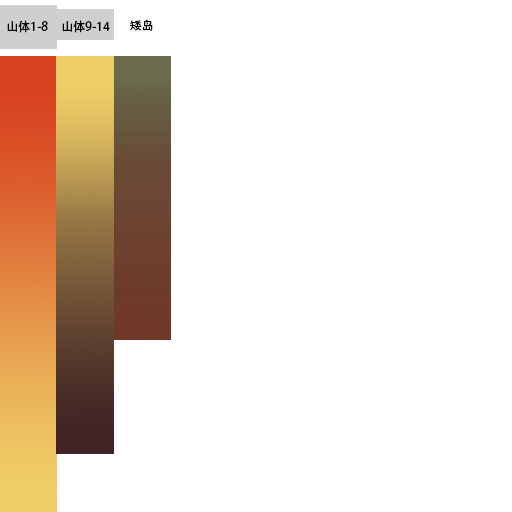
<style>
.page{position:relative;width:512px;height:512px;background:#ffffff}
.page>*{position:absolute;margin:0}
.t1{font:12px "AdobeHeitiStd-Regular";color:#000000}
</style>
<div class="page">
<p class="t1" style="left:7px;top:20px;width:41px;height:13px">山体1-8</p>
<p class="t1" style="left:62px;top:20px;width:48px;height:13px">山体9-14</p>
<p class="t1" style="left:130px;top:19px;width:23px;height:12px">矮岛</p>
</div>
